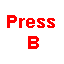
<style>
.page{position:relative;width:64px;height:64px;background:#ffffff}
.page>*{position:absolute;margin:0}
.t1{font:18px "Arial-BoldMT";color:#ff0000}
</style>
<div class="page">
<p class="t1" style="left:7px;top:15px;width:48px;height:34px;text-align:center">Press <br>B</p>
</div>
